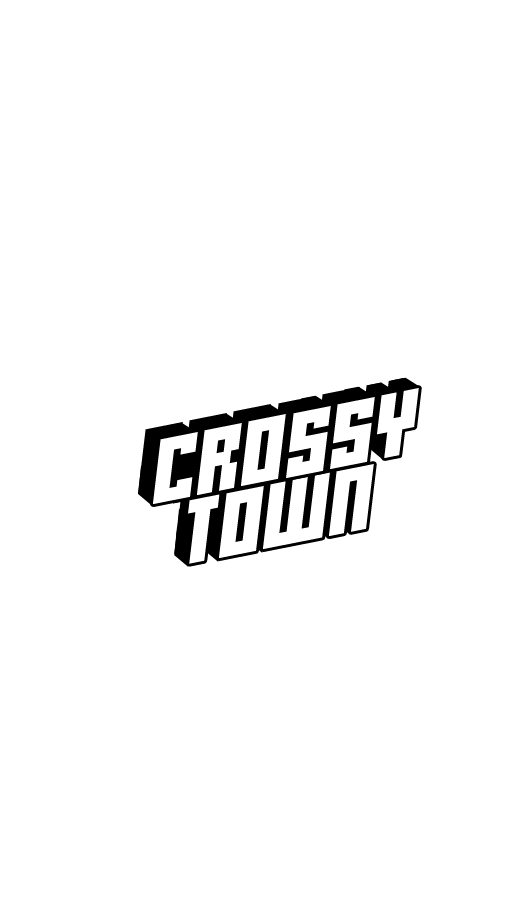
<style>
.page{position:relative;width:513px;height:920px;background:#ffffff}
.page>*{position:absolute;margin:0}
.t1{font:130px "pxlxxl";scale:1.16 1}
.t2{font:130px "pxlxxl";color:#ffffff;scale:1.16 1}
</style>
<div class="page">
<p class="t1" style="left:138px;top:378px;width:266px;height:116px;rotate:-11deg">CROSSY</p>
<p class="t2" style="left:153px;top:388px;width:266px;height:116px;rotate:-11deg">CROSSY</p>
<p class="t2" style="left:188px;top:464px;width:186px;height:100px;rotate:-11deg">TOWN</p>
</div>
